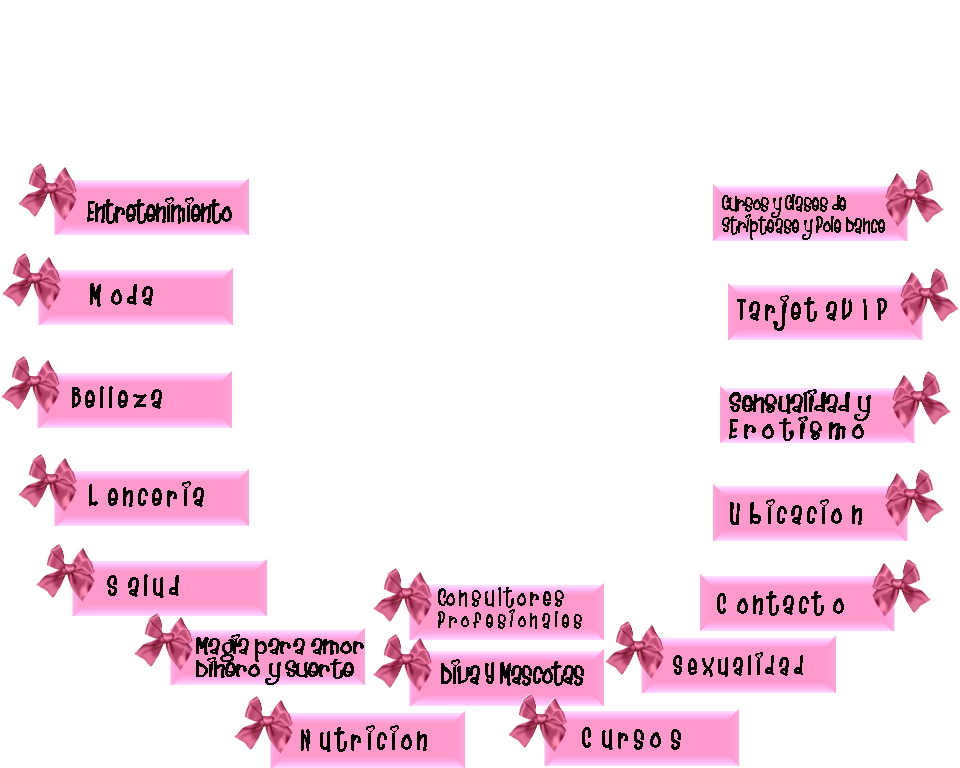
<style>
.page{position:relative;width:960px;height:768px;background:#ffffff}
.page>*{position:absolute;margin:0}
.t1{font:24px "Heartbreaker";color:#000000}
.t2{font:18px "Heartbreaker";color:#000000}
.t3{font:22.2px "Heartbreaker";color:#000000;scale:1.26 1}
.t4{font:20px "Heartbreaker";color:#000000}
.t5{font:19px "Heartbreaker";color:#000000;scale:1.39 1}
.t6{font:22px "Heartbreaker";color:#000000}
</style>
<div class="page">
<p class="t1" style="left:87px;top:197px;width:145px;height:27px">Entretenimiento</p>
<p class="t2" style="left:722px;top:194px;width:163px;height:46px">Cursos y Clases de  <br>Striptease y Pole Dance</p>
<p class="t1" style="left:90px;top:283px;width:63px;height:24px">M  o d a</p>
<p class="t1" style="left:737px;top:295px;width:150px;height:36px">T a r j e t  a V  I  P</p>
<p class="t1" style="left:72px;top:386px;width:90px;height:23px">B e l l e z a</p>
<p class="t3" style="left:729px;top:389px;width:142px;height:52px">Sensualidad y<br>E r o t i s m o</p>
<p class="t1" style="left:89px;top:481px;width:115px;height:26px">L  e n c e r i a</p>
<p class="t1" style="left:730px;top:499px;width:132px;height:26px">U  b i c a c i o  n</p>
<p class="t1" style="left:107px;top:574px;width:72px;height:24px">S  a l u d</p>
<p class="t2" style="left:438px;top:587px;width:144px;height:42px"><span class="t4">Co n s u l t o r e s<br></span>P r o f e s i o n a l e s</p>
<p class="t1" style="left:717px;top:591px;width:127px;height:25px">C  o n t a c t  o</p>
<p class="t5" style="left:196px;top:634px;width:168px;height:51px">Magia para amor<br>Dinero y Suerte</p>
<p class="t6" style="left:673px;top:652px;width:130px;height:25px">S e x u a l i d a d</p>
<p class="t1" style="left:441px;top:659px;width:143px;height:27px">Diva Y Mascotas</p>
<p class="t1" style="left:301px;top:725px;width:126px;height:27px">N  u t r i c i o n</p>
<p class="t1" style="left:582px;top:727px;width:99px;height:23px">C  u r s o  s</p>
</div>
